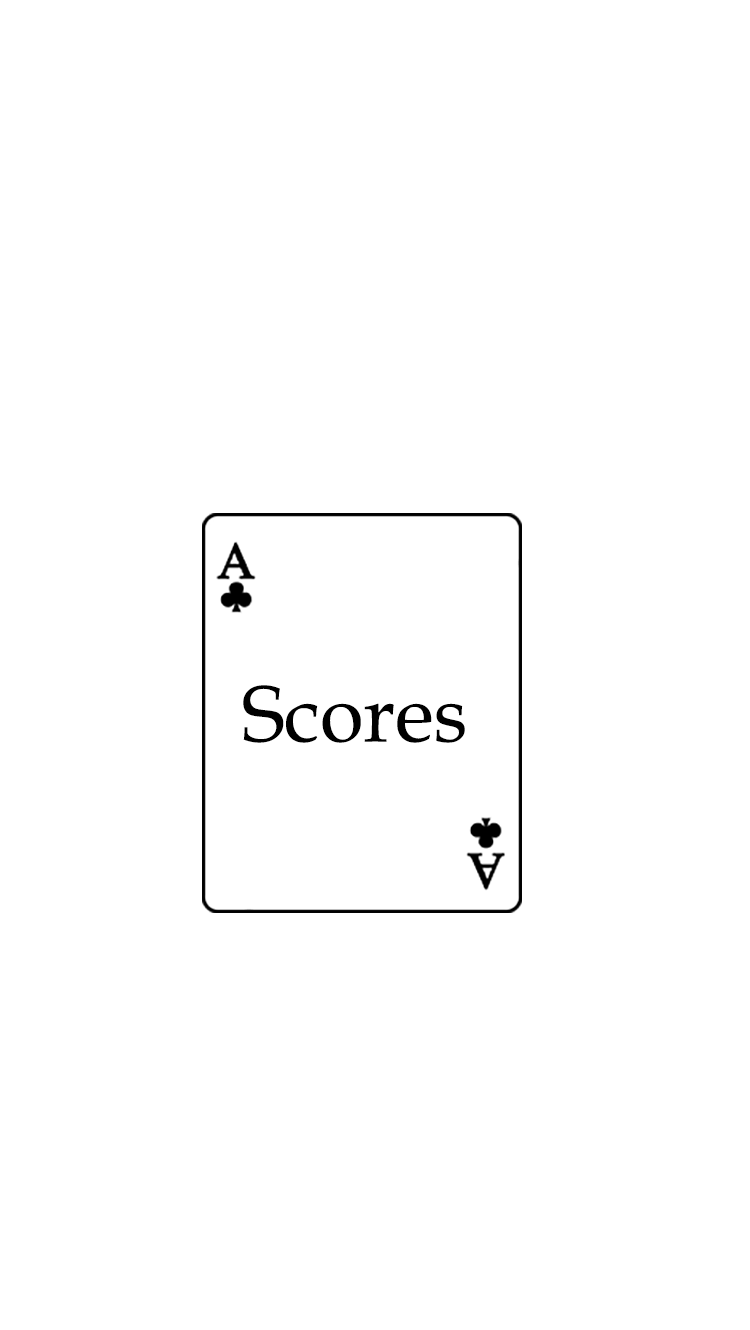
<style>
.page{position:relative;width:750px;height:1330px;background:#ffffff}
.page>*{position:absolute;margin:0}
.t1{font:80px "BookAntiqua";color:#000000}
</style>
<div class="page">
<p class="t1" style="left:243px;top:685px;width:222px;height:58px">Scores</p>
</div>
